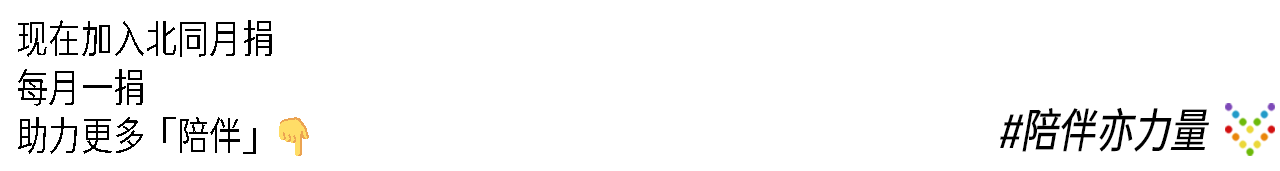
<style>
.page{position:relative;width:1280px;height:171px;background:#ffffff}
.page>*{position:absolute;margin:0}
.t1{font:40.3px "GlowSansSC-Compressed-Regular";color:#000000}
.t2{font:40.3px "EmojiOneColor";color:#000000}
.t3{font:47px "GlowSansSC-Compressed-Book";color:#000000;font-style:italic}
</style>
<div class="page">
<p class="t1" style="left:18px;top:20px;width:291px;height:136px">现在加入北同月捐<br>每月一捐<br>助力更多「陪伴」<span class="t2">👇</span></p>
<p class="t3" style="left:1000px;top:107px;width:209px;height:45px">#陪伴亦力量</p>
</div>
